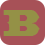
<style>
.page{position:relative;width:45px;height:45px;background:#a75157}
.page>*{position:absolute;margin:0}
.t1{font:50px "Saddlebag-Black";color:#949146}
</style>
<div class="page">
<p class="t1" style="left:3px;top:10px;width:37px;height:26px">B</p>
</div>
